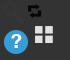
<style>
.page{position:relative;width:70px;height:60px;background:#333333}
.page>*{position:absolute;margin:0}
.t1{font:19.6px "HelveticaNeue-Bold";letter-spacing:-0.02em;color:#ffffff}
</style>
<div class="page">
<p class="t1" style="left:11px;top:34px;width:11px;height:14px">?</p>
</div>
